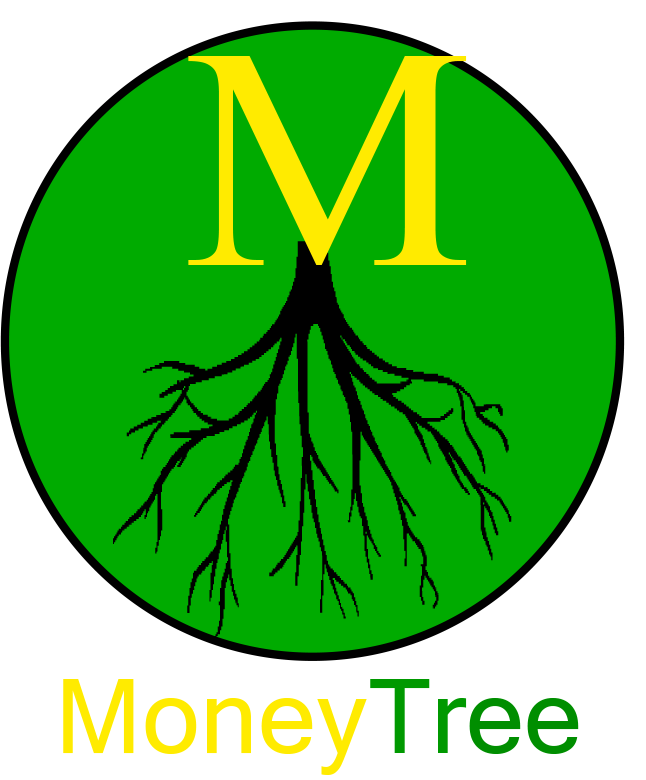
<style>
.page{position:relative;width:646px;height:780px;background:#00ab00}
.page>*{position:absolute;margin:0}
.t1{font:315.3px "MyriadPro-Regular";color:#ffeb00;scale:1.04 1}
.t2{font:104.2px "MicrosoftSansSerif";color:#ffeb00}
.t3{font:104.2px "MicrosoftSansSerif";color:#009900}
.t4{font:104.2px "MicrosoftSansSerif";color:#008f00}
</style>
<div class="page">
<p class="t1" style="left:188px;top:56px;width:279px;height:209px">M</p>
<p class="t2" style="left:63px;top:679px;width:516px;height:96px">Money<span class="t3">Tr</span><span class="t4">ee</span></p>
</div>
